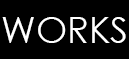
<style>
.page{position:relative;width:129px;height:59px;background:#000000}
.page>*{position:absolute;margin:0}
.t1{font:36px "CenturyGothic";color:#ffffff}
</style>
<div class="page">
<p class="t1" style="left:2px;top:17px;width:124px;height:26px">WORKS</p>
</div>
